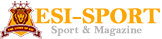
<style>
.page{position:relative;width:162px;height:39px;background:#ffffff}
.page>*{position:absolute;margin:0}
.t1{font:22.5px "BellMTBold";color:#ffa500;font-weight:bold}
.t2{font:10.7px "BellMTBold";color:#b5b2b2;font-weight:bold}
</style>
<div class="page">
<p class="t1" style="left:34px;top:8px;width:126px;height:16px">ESI-SPORT</p>
<p class="t2" style="left:51px;top:25px;width:91px;height:11px">Sport &amp; Magazine</p>
</div>
